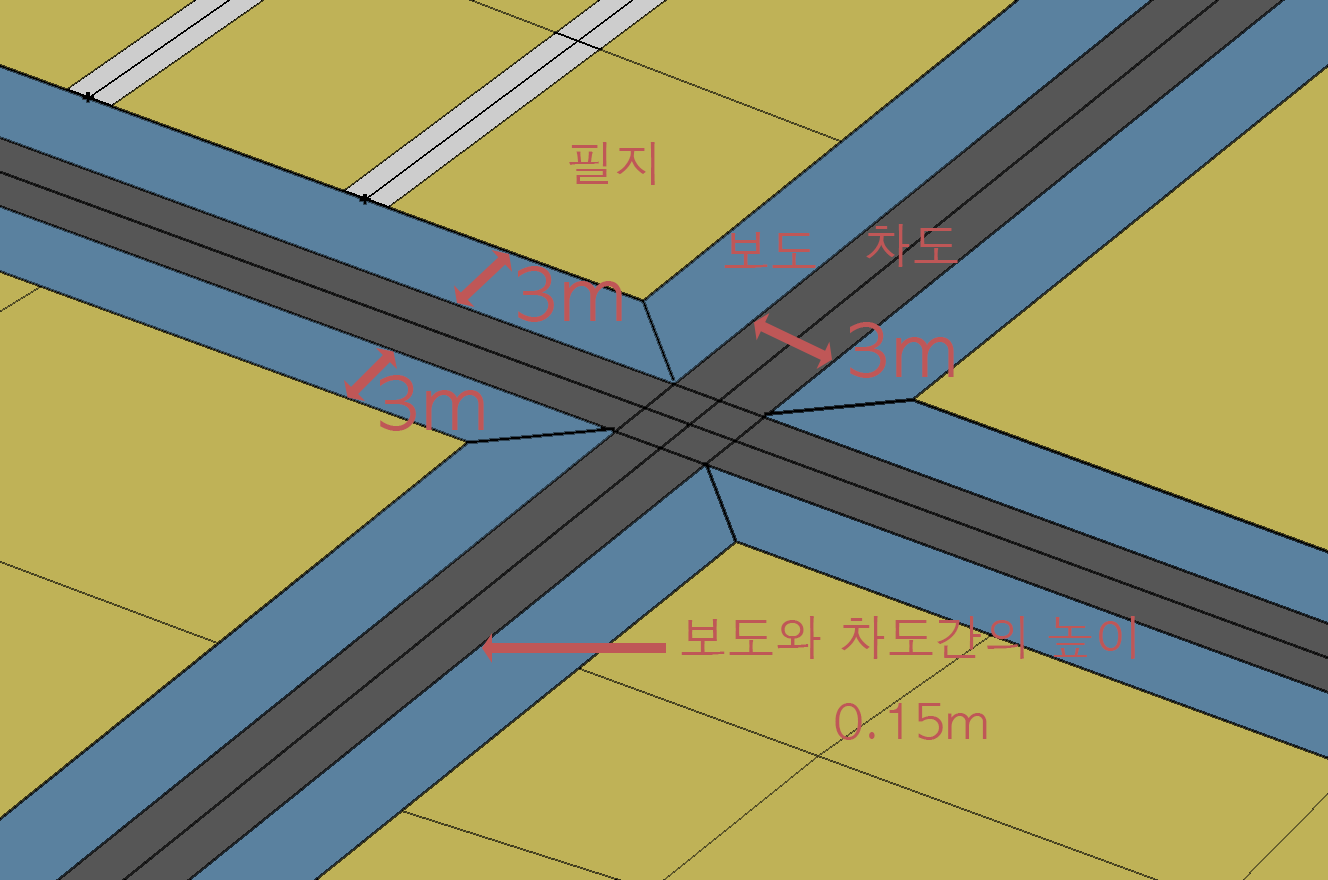
<style>
.page{position:relative;width:1328px;height:880px;background:#bfb257}
.page>*{position:absolute;margin:0}
.t1{font:48px "AppleGothic";color:#bf5757}
.t2{font:72px "AppleGothic";color:#bf5757}
</style>
<div class="page">
<p class="t1" style="left:569px;top:142px;width:86px;height:43px">필지</p>
<p class="t1" style="left:724px;top:232px;width:92px;height:36px">보도</p>
<p class="t1" style="left:866px;top:224px;width:92px;height:43px">차도</p>
<p class="t2" style="left:518px;top:266px;width:104px;height:56px">3m</p>
<p class="t2" style="left:850px;top:322px;width:104px;height:56px">3m</p>
<p class="t2" style="left:380px;top:375px;width:104px;height:56px">3m</p>
<p class="t1" style="left:681px;top:616px;width:454px;height:124px;text-align:center">보도와 차도간의 높이<br>0.15m</p>
</div>
